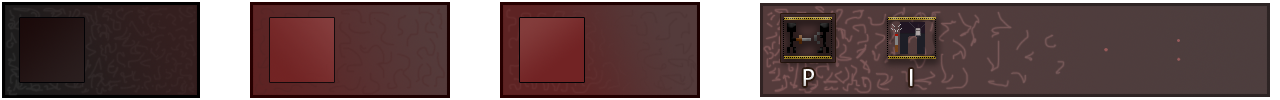
<style>
.page{position:relative;width:1280px;height:100px}
.page>*{position:absolute;margin:0}
.t1{font:24px "MyriadPro-Regular";color:#ffffff}
</style>
<div class="page">
<p class="t1" style="left:803px;top:69px;width:11px;height:17px">P</p>
<p class="t1" style="left:910px;top:69px;width:3px;height:17px">I</p>
</div>
